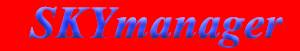
<style>
.page{position:relative;width:300px;height:51px;background:#ff0000}
.page>*{position:absolute;margin:0}
.t1{font:45.8px "TimesNewRomanPS-BoldItalicMT"}
</style>
<div class="page">
<p class="t1" style="left:28px;top:6px;width:255px;height:42px">SKYmanager</p>
</div>
